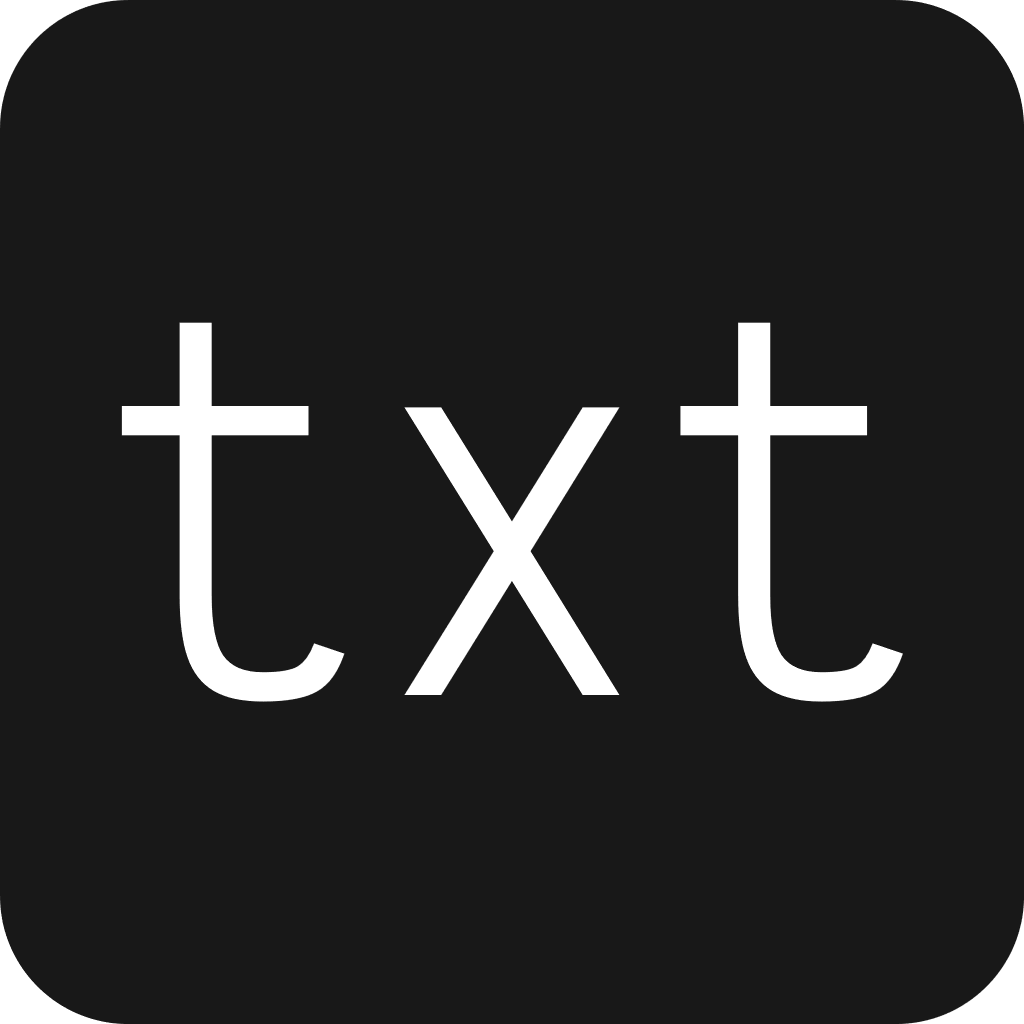
<style>
.page{position:relative;width:1024px;height:1024px;background:#181818}
.page>*{position:absolute;margin:0}
.t1{font:512px "VictorMono-Regular";color:#ffffff}
</style>
<div class="page">
<p class="t1" style="left:121px;top:322px;width:782px;height:380px">txt</p>
</div>
